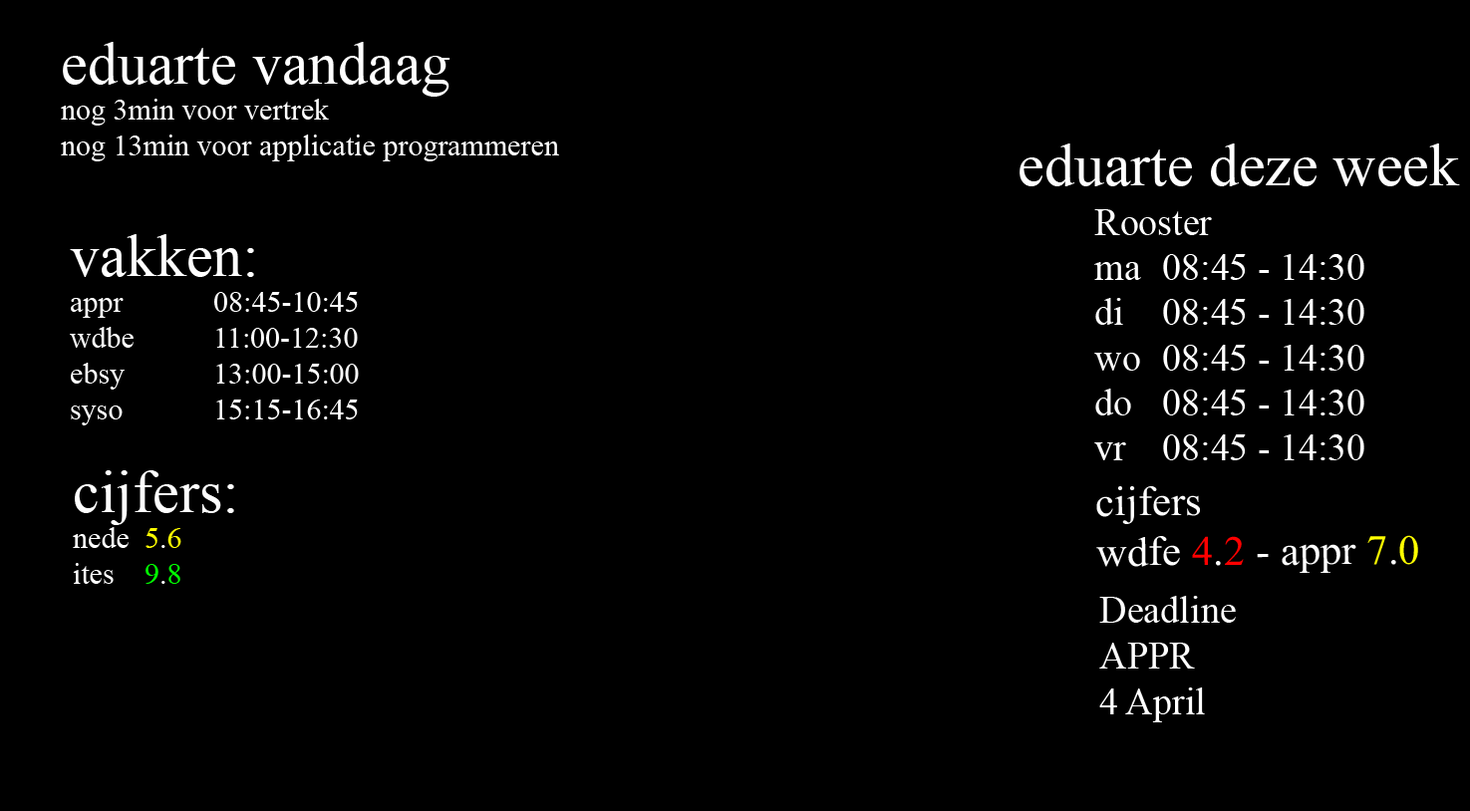
<style>
.page{position:relative;width:1470px;height:811px;background:#000000}
.page>*{position:absolute;margin:0}
.t1{font:29.9px "TimesNewRomanPSMT";color:#ffffff}
.t2{font:59.8px "TimesNewRomanPSMT";color:#ffffff}
.t3{font:37.6px "TimesNewRomanPSMT";color:#ffffff}
.t4{font:29.9px "TimesNewRomanPSMT";color:#ffff00}
.t5{font:29.9px "TimesNewRomanPSMT";color:#00ff00}
.t6{font:41.7px "TimesNewRomanPSMT";color:#ffffff}
.t7{font:41.7px "TimesNewRomanPSMT";color:#ff0000}
.t8{font:41.7px "TimesNewRomanPSMT";color:#ffff00}
.t9{font:38px "TimesNewRomanPSMT";color:#ffffff}
</style>
<div class="page">
<p class="t1" style="left:61px;top:42px;width:498px;height:119px"><span class="t2">eduarte vandaag<br></span>nog 3min voor vertrek<br>nog 13min voor applicatie programmeren</p>
<p class="t2" style="left:1019px;top:144px;width:441px;height:42px">eduarte deze week</p>
<p class="t3" style="left:1094px;top:209px;width:270px;height:251px">Rooster<br>ma 08:45 - 14:30<br>di  08:45 - 14:30<br>wo 08:45 - 14:30<br>do  08:45 - 14:30<br>vr  08:45 - 14:30</p>
<p class="t1" style="left:70px;top:234px;width:289px;height:192px"><span class="t2">vakken:<br></span>appr    08:45-10:45<br>wdbe   11:00-12:30<br>ebsy   13:00-15:00<br>syso   15:15-16:45</p>
<p class="t2" style="left:73px;top:470px;width:161px;height:114px">cijfers:<br><span class="t1">nede  </span><span class="t4">5</span><span class="t1">.</span><span class="t4">6<br></span><span class="t1">ites  </span><span class="t5">9</span><span class="t1">.</span><span class="t5">8</span></p>
<p class="t6" style="left:1096px;top:486px;width:322px;height:87px">cijfers<br>wdfe<span class="t7"> 4</span>.<span class="t7">2 </span>- appr <span class="t8">7</span>.<span class="t8">0</span></p>
<p class="t9" style="left:1099px;top:596px;width:137px;height:127px">Deadline<br>APPR<br>4 April</p>
</div>
